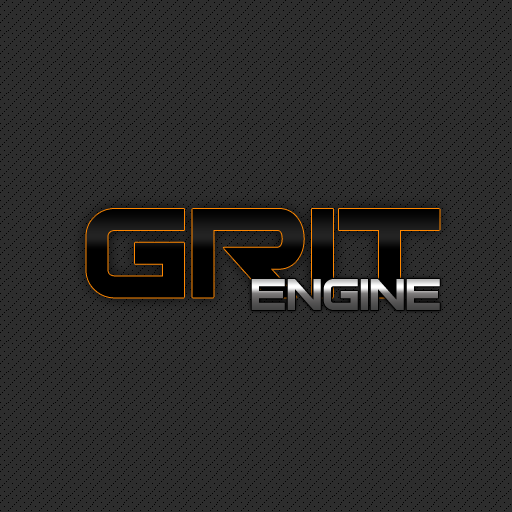
<style>
.page{position:relative;width:512px;height:512px;background:#2d2d2d}
.page>*{position:absolute;margin:0}
.t1{font:172px "Bitsumishi";color:#000000}
.t2{font:60px "Bitsumishi"}
</style>
<div class="page">
<p class="t1" style="left:86px;top:209px;width:354px;height:89px">Grit</p>
<p class="t2" style="left:251px;top:279px;width:189px;height:31px">Engine</p>
</div>
